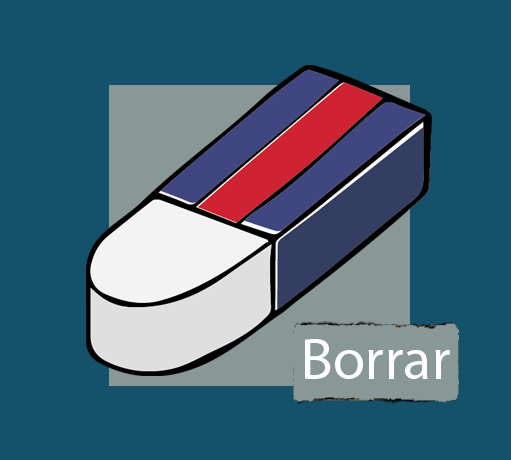
<style>
.page{position:relative;width:511px;height:460px;background:#14526b}
.page>*{position:absolute;margin:0}
.t1{font:58.3px "MyriadHebrew-Regular";color:#ffffff}
</style>
<div class="page">
<p class="t1" style="left:305px;top:339px;width:145px;height:40px">Borrar</p>
</div>
